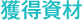
<style>
.page{position:relative;width:82px;height:21px;background:#ffffff}
.page>*{position:absolute;margin:0}
.t1{font:21px "GothicMB101Pro-Medium";color:#1dbcc0}
</style>
<div class="page">
<p class="t1" style="left:0px;top:0px;width:82px;height:20px">獲得資材</p>
</div>
